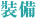
<style>
.page{position:relative;width:36px;height:18px;background:#ffffff}
.page>*{position:absolute;margin:0}
.t1{font:18px "RyuminPr6N-ExBold";color:#26a2a2}
</style>
<div class="page">
<p class="t1" style="left:0px;top:0px;width:36px;height:18px">裝備</p>
</div>
